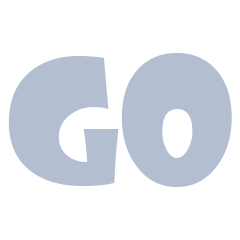
<style>
.page{position:relative;width:240px;height:240px;background:#ffffff}
.page>*{position:absolute;margin:0}
.t1{font:166.7px "ShowcardGothic-Reg";color:#b3bed1}
</style>
<div class="page">
<p class="t1" style="left:8px;top:53px;width:224px;height:134px">go</p>
</div>
